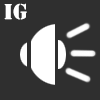
<style>
.page{position:relative;width:100px;height:100px;background:#2f2f2f}
.page>*{position:absolute;margin:0}
.t1{font:20.4px "StencilStd";color:#ffffff}
</style>
<div class="page">
<p class="t1" style="left:4px;top:3px;width:23px;height:17px">ig</p>
</div>
